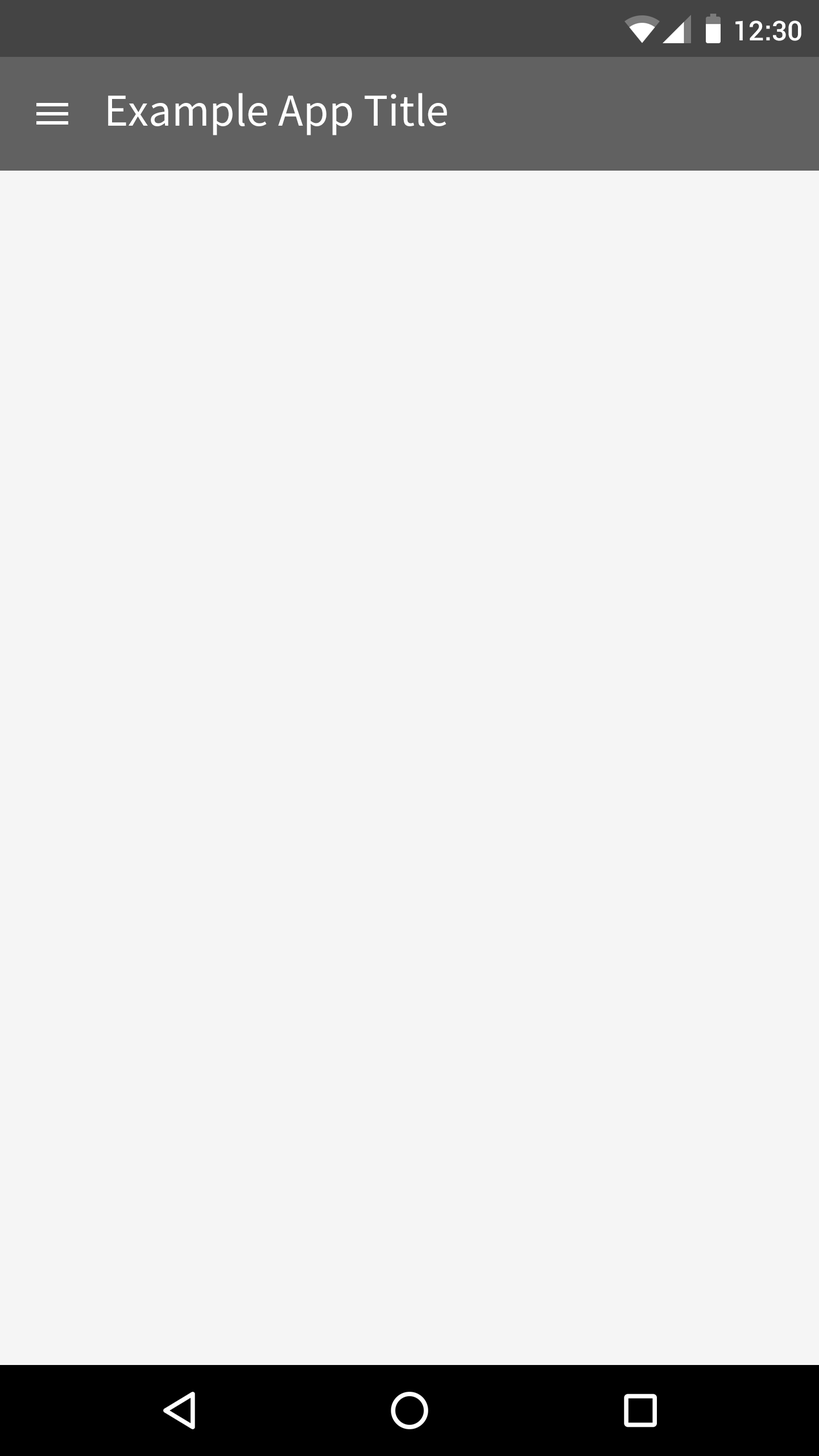
<style>
.page{position:relative;width:819px;height:1456px;background:#f5f5f5}
.page>*{position:absolute;margin:0}
.t1{font:27.3px "Roboto-Medium";color:#ffffff}
.t2{font:40.9px "NotoSansCJKkr-Regular";color:#ffffff}
</style>
<div class="page">
<p class="t1" style="left:735px;top:20px;width:66px;height:21px">12:30</p>
<p class="t2" style="left:108px;top:93px;width:339px;height:42px">Example App Title</p>
</div>
